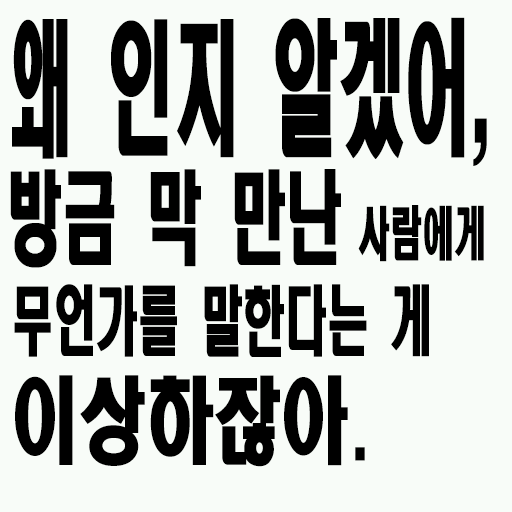
<style>
.page{position:relative;width:512px;height:512px;background:#f8fcf8}
.page>*{position:absolute;margin:0}
.t1{font:145.2px "HeadlineR-HM";color:#000000;scale:0.45 1}
.t2{font:57.6px "HeadlineR-HM";color:#000000;scale:0.56 1}
.t3{font:100.8px "HeadlineR-HM";color:#000000;scale:0.56 1}
.t4{font:75.6px "HeadlineR-HM";color:#000000;scale:0.56 1}
.t5{font:93.6px "HeadlineR-HM";color:#000000;scale:0.72 1}
</style>
<div class="page">
<p class="t1" style="left:12px;top:17px;width:475px;height:149px">왜 인지 알겠어,</p>
<p class="t2" style="left:10px;top:169px;width:474px;height:99px"><span class="t3">방금 막 만난</span> 사람에게 무언가를</p>
<p class="t4" style="left:14px;top:284px;width:415px;height:73px">무언가를 말한다는 게</p>
<p class="t5" style="left:15px;top:375px;width:350px;height:92px">이상하잖아.</p>
</div>
